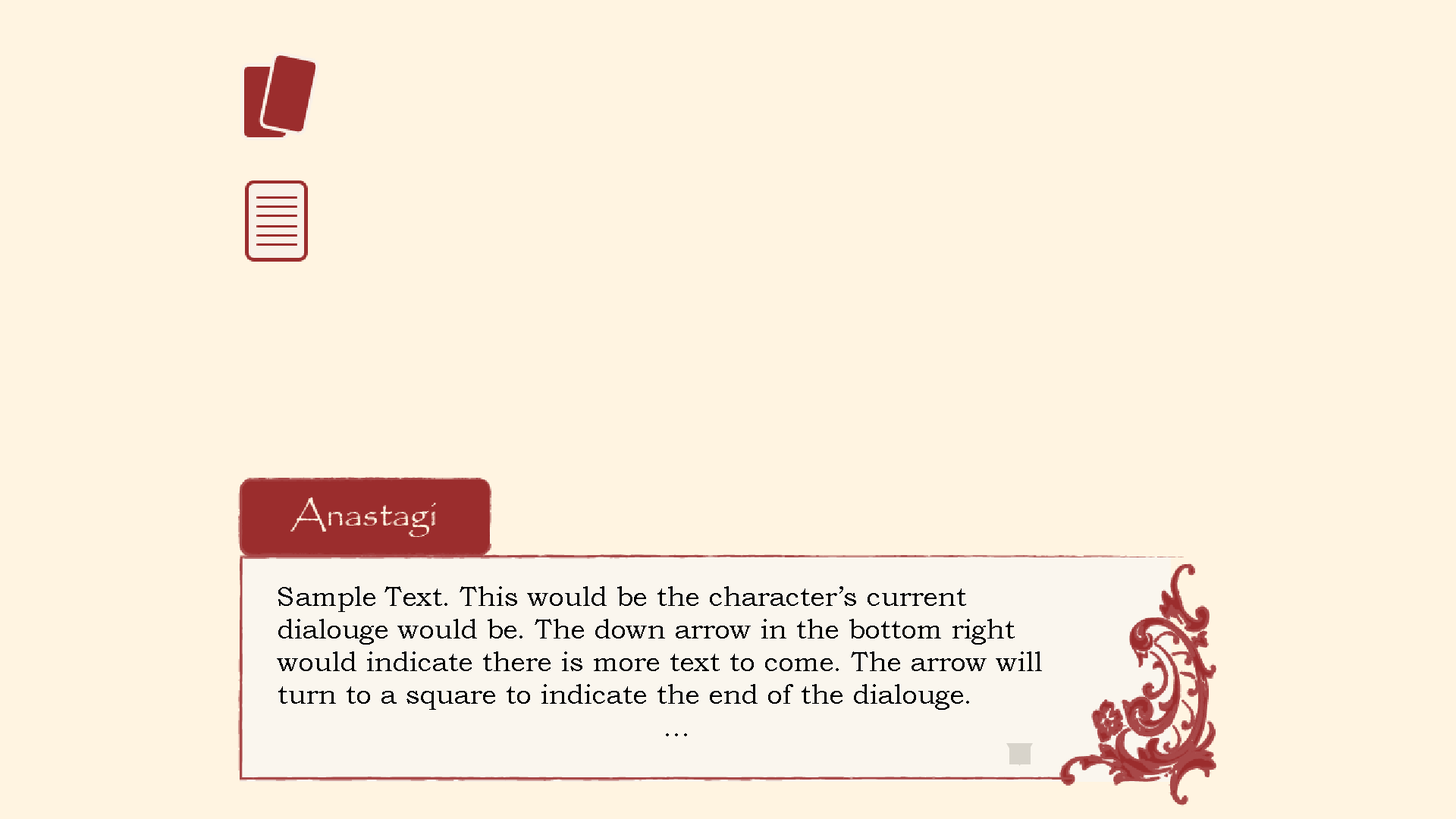
<style>
.page{position:relative;width:1456px;height:819px;background:#fff4e1}
.page>*{position:absolute;margin:0}
.t1{font:27.3px "BookmanOldStyle";color:#000000}
</style>
<div class="page">
<p class="t1" style="left:277px;top:586px;width:765px;height:150px">Sample Text. This would be the character’s current dialouge would be. The down arrow in the bottom right would indicate there is more text to come. The arrow will turn to a square to indicate the end of the dialouge.<br>...</p>
</div>
